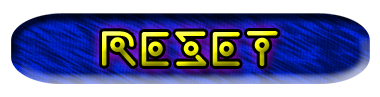
<style>
.page{position:relative;width:380px;height:97px;background:#ffffff}
.page>*{position:absolute;margin:0}
.t1{font:50px "wearealien!!"}
</style>
<div class="page">
<p class="t1" style="left:102px;top:31px;width:176px;height:35px">Reset</p>
</div>
